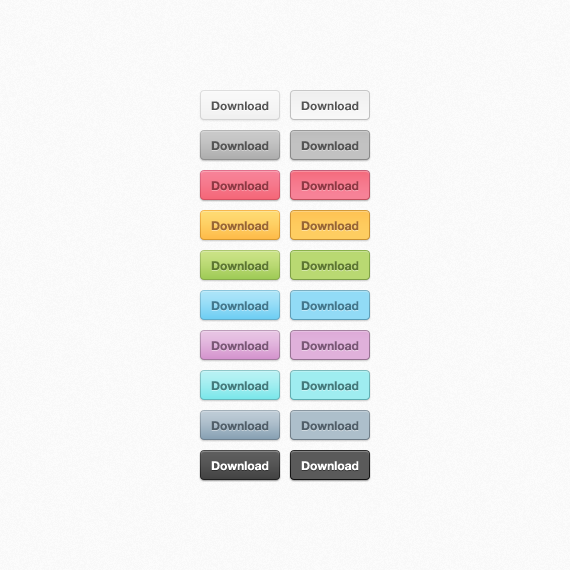
<style>
.page{position:relative;width:570px;height:570px;background:#fcfcfc}
.page>*{position:absolute;margin:0}
.t1{font:12px "HelveticaNeue-Bold";color:#555555}
.t2{font:12px "HelveticaNeue-Bold";color:#913945}
.t3{font:12px "HelveticaNeue-Bold";color:#903844}
.t4{font:12px "HelveticaNeue-Bold";color:#996633}
.t5{font:12px "HelveticaNeue-Bold";color:#5d7731}
.t6{font:12px "HelveticaNeue-Bold";color:#42788e}
.t7{font:12px "HelveticaNeue-Bold";color:#7b5777}
.t8{font:12px "HelveticaNeue-Bold";color:#437b7d}
.t9{font:12px "HelveticaNeue-Bold";color:#515f6a}
.t10{font:12px "HelveticaNeue-Bold";color:#ffffff}
</style>
<div class="page">
<p class="t1" style="left:211px;top:101px;width:58px;height:10px">Download</p>
<p class="t1" style="left:301px;top:101px;width:58px;height:10px">Download</p>
<p class="t1" style="left:211px;top:141px;width:58px;height:10px">Download</p>
<p class="t1" style="left:301px;top:141px;width:58px;height:10px">Download</p>
<p class="t2" style="left:211px;top:181px;width:58px;height:10px">Download</p>
<p class="t3" style="left:301px;top:181px;width:58px;height:10px">Download</p>
<p class="t4" style="left:211px;top:221px;width:58px;height:10px">Download</p>
<p class="t4" style="left:301px;top:221px;width:58px;height:10px">Download</p>
<p class="t5" style="left:211px;top:261px;width:58px;height:10px">Download</p>
<p class="t5" style="left:301px;top:261px;width:58px;height:10px">Download</p>
<p class="t6" style="left:211px;top:301px;width:58px;height:10px">Download</p>
<p class="t6" style="left:301px;top:301px;width:58px;height:10px">Download</p>
<p class="t7" style="left:211px;top:341px;width:58px;height:10px">Download</p>
<p class="t7" style="left:301px;top:341px;width:58px;height:10px">Download</p>
<p class="t8" style="left:211px;top:381px;width:58px;height:10px">Download</p>
<p class="t8" style="left:301px;top:381px;width:58px;height:10px">Download</p>
<p class="t9" style="left:211px;top:421px;width:58px;height:10px">Download</p>
<p class="t9" style="left:301px;top:421px;width:58px;height:10px">Download</p>
<p class="t10" style="left:211px;top:461px;width:58px;height:10px">Download</p>
<p class="t10" style="left:301px;top:461px;width:58px;height:10px">Download</p>
</div>
